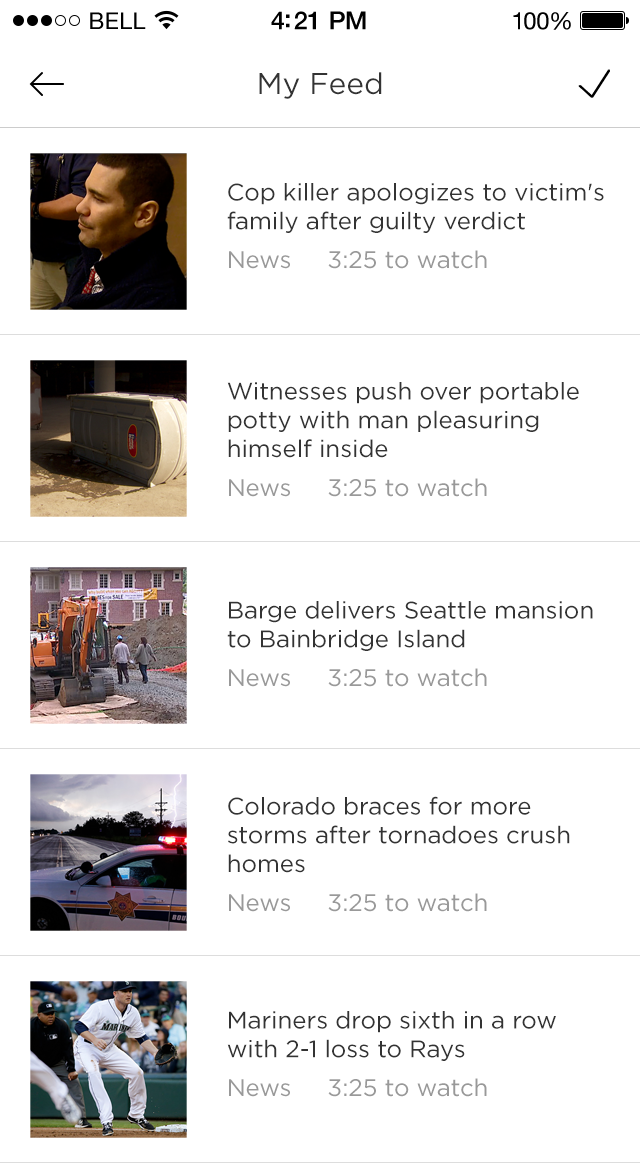
<style>
.page{position:relative;width:640px;height:1163px;background:#ffffff}
.page>*{position:absolute;margin:0}
.t1{font:23px "HelveticaNeue";letter-spacing:0.02em;color:#000000}
.t2{font:25px "HelveticaNeue-Medium";letter-spacing:-0.02em;color:#000000}
.t3{font:24px "HelveticaNeue";letter-spacing:-0.02em;color:#010101}
.t4{font:30px "Gotham-Book";color:#333333}
.t5{font:24px "Gotham-Book";color:#333333}
.t6{font:24px "Gotham-Book";color:#999999}
</style>
<div class="page">
<p class="t1" style="left:90px;top:12px;width:56px;height:17px">BELL</p>
<p class="t2" style="left:271px;top:11px;width:95px;height:19px">4:21 PM</p>
<p class="t3" style="left:513px;top:12px;width:58px;height:18px">100%</p>
<p class="t4" style="left:259px;top:72px;width:123px;height:27px">My Feed</p>
<p class="t5" style="left:227px;top:183px;width:377px;height:86px">Cop killer apologizes to victim's family after guilty verdict<br><span class="t6">News     3:25 to watch</span></p>
<p class="t5" style="left:227px;top:382px;width:352px;height:115px">Witnesses push over portable potty with man pleasuring himself inside<br><span class="t6">News     3:25 to watch</span></p>
<p class="t5" style="left:227px;top:601px;width:366px;height:86px">Barge delivers Seattle mansion to Bainbridge Island<br><span class="t6">News     3:25 to watch</span></p>
<p class="t5" style="left:228px;top:796px;width:342px;height:116px">Colorado braces for more storms after tornadoes crush homes<br><span class="t6">News     3:25 to watch</span></p>
<p class="t5" style="left:227px;top:1011px;width:329px;height:86px">Mariners drop sixth in a row with 2-1 loss to Rays<br><span class="t6">News     3:25 to watch</span></p>
</div>
